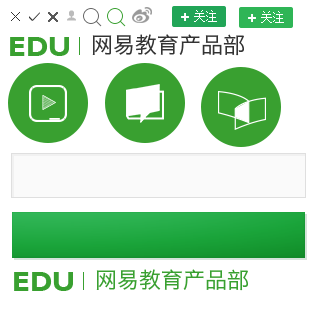
<style>
.page{position:relative;width:315px;height:310px;background:#ffffff}
.page>*{position:absolute;margin:0}
.t1{font:12px "SimSun";color:#ffffff}
.t2{font:28px "GillSansMT-Bold";color:#39a030}
.t3{font:22px "HiraginoSansGB-W3";color:#333333}
.t4{font:22px "HiraginoSansGB-W3";color:#39a030}
</style>
<div class="page">
<p class="t1" style="left:194px;top:10px;width:23px;height:12px">关注</p>
<p class="t1" style="left:261px;top:11px;width:23px;height:12px">关注</p>
<p class="t2" style="left:10px;top:37px;width:59px;height:19px">EDU</p>
<p class="t3" style="left:92px;top:34px;width:152px;height:22px">网易教育产品部</p>
<p class="t4" style="left:96px;top:269px;width:152px;height:22px">网易教育产品部</p>
<p class="t2" style="left:14px;top:272px;width:59px;height:19px">EDU</p>
</div>
